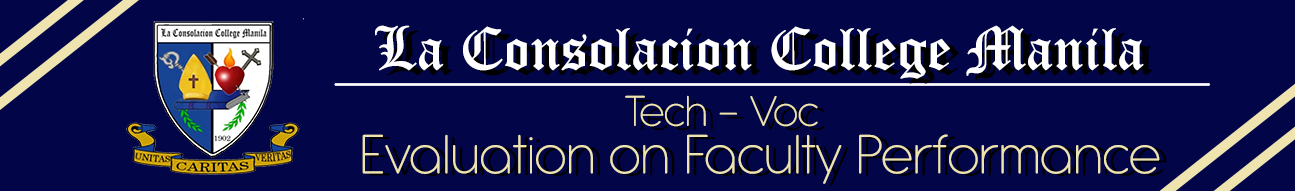
<style>
.page{position:relative;width:1295px;height:191px;background:#020548}
.page>*{position:absolute;margin:0}
.t1{font:60px "OldEnglishTextMT";color:#ffffff}
.t2{font:46.7px "AntipastoPro-Extralight";color:#efe4b0}
.t3{font:46.7px "AntipastoPro-Extralight";color:#000000}
.t4{font:60px "AntipastoPro-Extralight";color:#efe4b0}
.t5{font:60px "AntipastoPro-Extralight";color:#000000}
</style>
<div class="page">
<p class="t1" style="left:375px;top:25px;width:769px;height:54px">La Consolacion College Manila</p>
<p class="t2" style="left:625px;top:95px;width:193px;height:32px">Tech - Voc</p>
<p class="t3" style="left:632px;top:99px;width:193px;height:32px">Tech - Voc</p>
<p class="t4" style="left:362px;top:134px;width:798px;height:50px">Evaluation on Faculty Performance</p>
<p class="t5" style="left:369px;top:136px;width:798px;height:50px">Evaluation on Faculty Performance</p>
</div>
